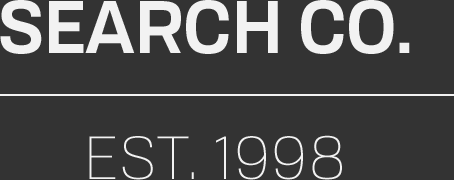
<style>
.page{position:relative;width:454px;height:180px;background:#333333}
.page>*{position:absolute;margin:0}
.t1{font:72px "Tofino-SemiboldPersonal";color:#f2f2f2;text-transform:uppercase}
.t2{font:60px "Tofino-LightPersonal";letter-spacing:0.05em;color:#f2f2f2;text-transform:uppercase}
</style>
<div class="page">
<p class="t1" style="left:0px;top:0px;width:410px;height:54px">Search Co.</p>
<p class="t2" style="left:89px;top:135px;width:253px;height:45px">est. 1998</p>
</div>
